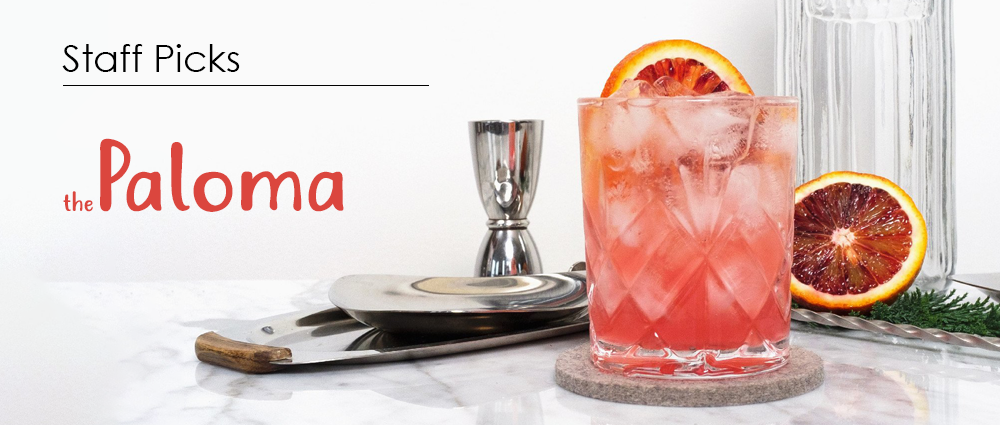
<style>
.page{position:relative;width:1000px;height:425px}
.page>*{position:absolute;margin:0}
.t1{font:37.5px "CenturyGothic";color:#000000}
.t2{font:91px "Justtellmewhat";color:#db463e}
.t3{font:25px "Justtellmewhat";color:#db463e}
</style>
<div class="page">
<p class="t1" style="left:62px;top:44px;width:178px;height:28px">Staff Picks</p>
<p class="t2" style="left:100px;top:138px;width:244px;height:74px">Paloma</p>
<p class="t3" style="left:63px;top:191px;width:30px;height:21px">the</p>
</div>
